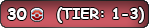
<style>
.page{position:relative;width:149px;height:28px}
.page>*{position:absolute;margin:0}
.t1{font:12px "ComicSansMS-Bold";color:#ffffff}
.t2{font:14.7px "ComicSansMS-Bold";color:#ffffff}
</style>
<div class="page">
<p class="t1" style="left:7px;top:8px;width:20px;height:12px">30</p>
<p class="t2" style="left:57px;top:7px;width:87px;height:16px">(TIER: 1-3)</p>
</div>
